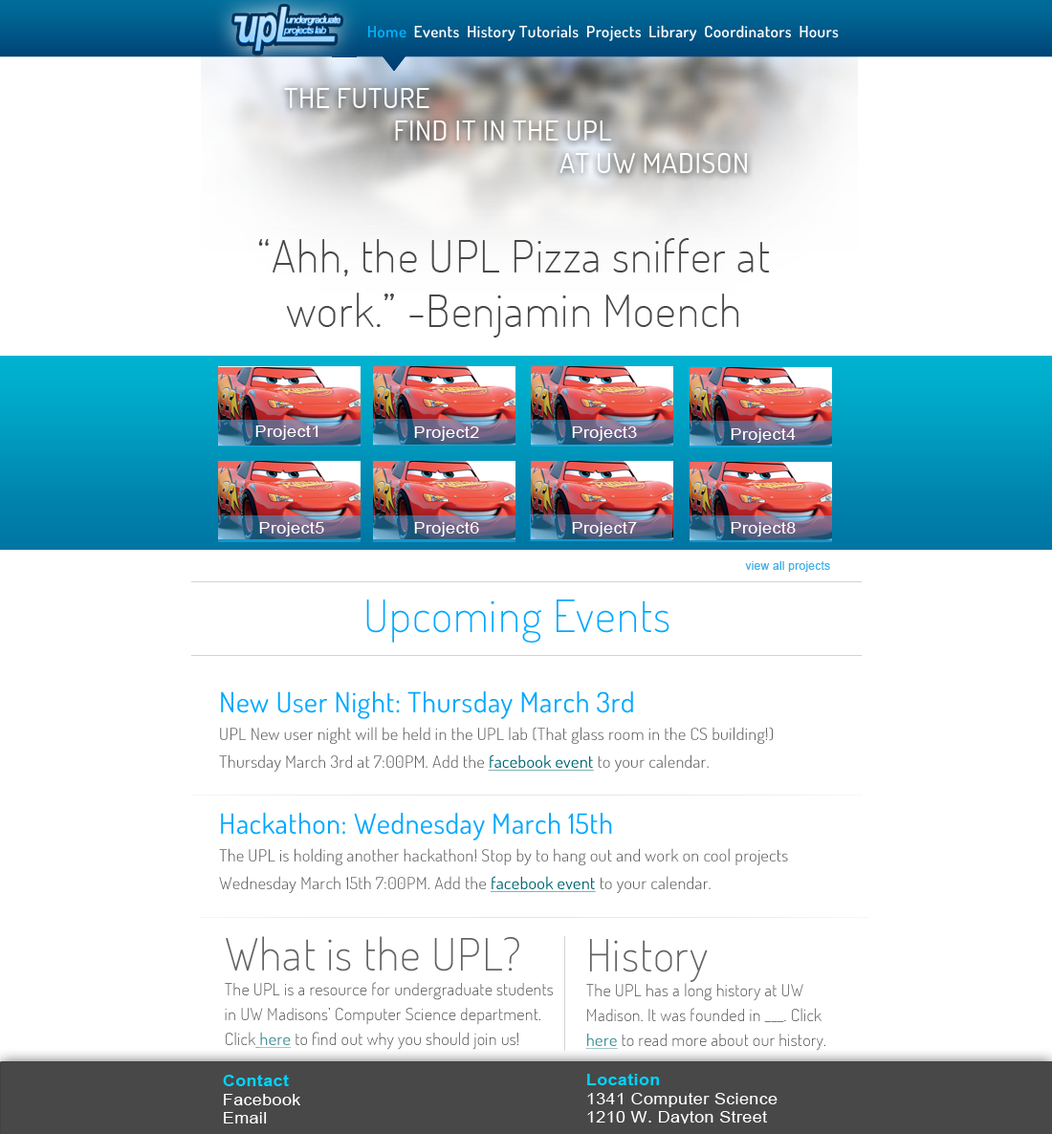
<style>
.page{position:relative;width:1052px;height:1134px;background:#ffffff}
.page>*{position:absolute;margin:0}
.t1{font:15.8px "TerminalDosis-SemiBold";letter-spacing:0.02em;color:#ffffff;scale:1.03 1}
.t2{font:15.8px "TerminalDosis-SemiBold";letter-spacing:0.02em;color:#00b3ff;scale:1.03 1}
.t3{font:27.8px/32.5px "TerminalDosis-Book";letter-spacing:0.02em;color:#ffffff;scale:1.03 1}
.t4{font:44.5px/54.5px "TerminalDosis-ExtraLight";letter-spacing:0.02em;color:#494949;scale:1.03 1}
.t5{font:16.7px "ArialMT";letter-spacing:0.02em;color:#ffffff;scale:1.03 1}
.t6{font:11.1px "ArialMT";letter-spacing:0.02em;color:#3eaee8;scale:1.03 1}
.t7{font:44.5px "TerminalDosis-ExtraLight";letter-spacing:0.02em;color:#00a8ff;scale:1.03 1}
.t8{font:16.7px/27.7px "TerminalDosis-Light";letter-spacing:0.02em;color:#636363;scale:1.03 1}
.t9{font:27.8px/27.7px "TerminalDosis-Book";letter-spacing:0.02em;color:#00a8ff;scale:1.03 1}
.t10{font:16.7px/27.7px "TerminalDosis-Book";letter-spacing:0.02em;color:#006773;text-decoration:underline;scale:1.03 1}
.t11{font:16.7px/24.9px "TerminalDosis-ExtraLight";letter-spacing:0.02em;color:#484848;scale:1.03 1}
.t12{font:44.5px/40.2px "TerminalDosis-ExtraLight";letter-spacing:0.02em;color:#636363;scale:1.03 1}
.t13{font:16.7px/24.9px "TerminalDosis-Book";letter-spacing:0.02em;color:#449098;text-decoration:underline;scale:1.03 1}
.t14{font:16.7px/18.2px "ArialMT";letter-spacing:0.02em;color:#ffffff;scale:1.03 1}
.t15{font:16.7px/18.2px "Arial-BoldMT";letter-spacing:0.02em;color:#00d2ff;scale:1.03 1}
</style>
<div class="page">
<p class="t1" style="left:368px;top:25px;width:470px;height:16px"><span class="t2">Home  </span>Events  History Tutorials  Projects  Library  Coordinators  Hours</p>
<p class="t3" style="left:284px;top:88px;width:463px;height:85px">THE FUTURE<br>    FIND IT IN THE UPL <br>        AT UW MADISON</p>
<p class="t4" style="left:258px;top:238px;width:512px;height:99px;text-align:center">“Ahh, the UPL Pizza sniffer at work.” -Benjamin Moench</p>
<p class="t5" style="left:255px;top:425px;width:63px;height:15px">Project1</p>
<p class="t5" style="left:414px;top:426px;width:65px;height:15px">Project2</p>
<p class="t5" style="left:572px;top:426px;width:65px;height:15px">Project3</p>
<p class="t5" style="left:730px;top:428px;width:65px;height:15px">Project4</p>
<p class="t5" style="left:259px;top:522px;width:65px;height:14px">Project5</p>
<p class="t5" style="left:414px;top:522px;width:65px;height:14px">Project6</p>
<p class="t5" style="left:572px;top:522px;width:65px;height:14px">Project7</p>
<p class="t5" style="left:730px;top:522px;width:65px;height:14px">Project8</p>
<p class="t6" style="left:745px;top:561px;width:85px;height:11px">view all projects</p>
<p class="t7" style="left:366px;top:599px;width:303px;height:43px">Upcoming Events</p>
<p class="t8" style="left:219px;top:691px;width:553px;height:81px"><span class="t9">New User Night: Thursday March 3rd<br></span>UPL New user night will be held in the UPL lab (That glass room in the CS building!)  Thursday March 3rd at 7:00PM. Add the <span class="t10">facebook event</span> to your calendar.</p>
<p class="t8" style="left:219px;top:812px;width:569px;height:81px"><span class="t9">Hackathon: Wednesday March 15th<br></span>The UPL is holding another hackathon! Stop by to hang out and work on cool projects Wednesday March 15th 7:00PM. Add the <span class="t10">facebook event</span> to your calendar.</p>
<p class="t11" style="left:225px;top:936px;width:328px;height:114px"><span class="t12">What is the UPL?<br></span>The UPL is a resource for undergraduate students in UW Madisons’ Computer Science department. Click <span class="t13">here </span>to find out why you should join us!</p>
<p class="t11" style="left:585px;top:939px;width:240px;height:112px"><span class="t12">History<br></span>The UPL has a long history at UW Madison. It was founded in ___. Click <span class="t13">here </span>to read more about our history.</p>
<p class="t14" style="left:587px;top:1074px;width:190px;height:49px"><span class="t15">Location<br></span>1341 Computer Science<br>1210 W. Dayton Street</p>
<p class="t14" style="left:223px;top:1075px;width:77px;height:48px"><span class="t15">Contact<br></span>Facebook<br>Email</p>
</div>
